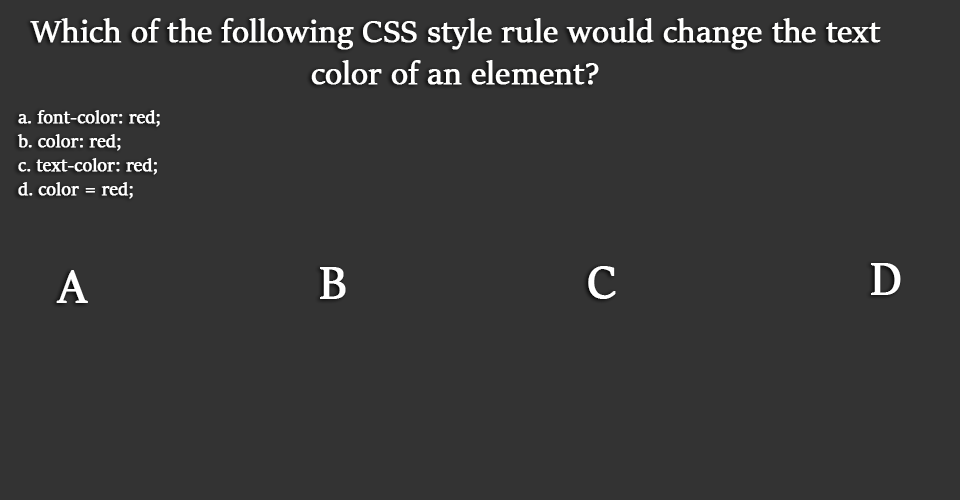
<style>
.page{position:relative;width:960px;height:500px;background:#333333}
.page>*{position:absolute;margin:0}
.t1{font:35px "SitkaBanner";color:#fffffe;font-weight:bold}
.t2{font:20px "SitkaBanner";color:#ffffff;font-weight:bold}
.t3{font:50px "SitkaBanner";color:#ffffff;font-weight:bold}
</style>
<div class="page">
<p class="t1" style="left:30px;top:18px;width:851px;height:67px;text-align:center">Which of the following CSS style rule would change the text color of an element?</p>
<p class="t2" style="left:17px;top:110px;width:143px;height:89px">a. font-color: red;<br> b. color: red;<br> c. text-color: red;<br> d. color = red;</p>
<p class="t3" style="left:56px;top:270px;width:32px;height:33px">A</p>
<p class="t3" style="left:320px;top:267px;width:26px;height:32px">B</p>
<p class="t3" style="left:588px;top:266px;width:28px;height:33px">C</p>
<p class="t3" style="left:871px;top:263px;width:30px;height:32px">D</p>
</div>
